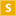
<style>
.page{position:relative;width:16px;height:16px;background:#edad00}
.page>*{position:absolute;margin:0}
.t1{font:12px "MyriadPro-Bold";color:#ffffff}
</style>
<div class="page">
<p class="t1" style="left:5px;top:3px;width:6px;height:9px">S</p>
</div>
